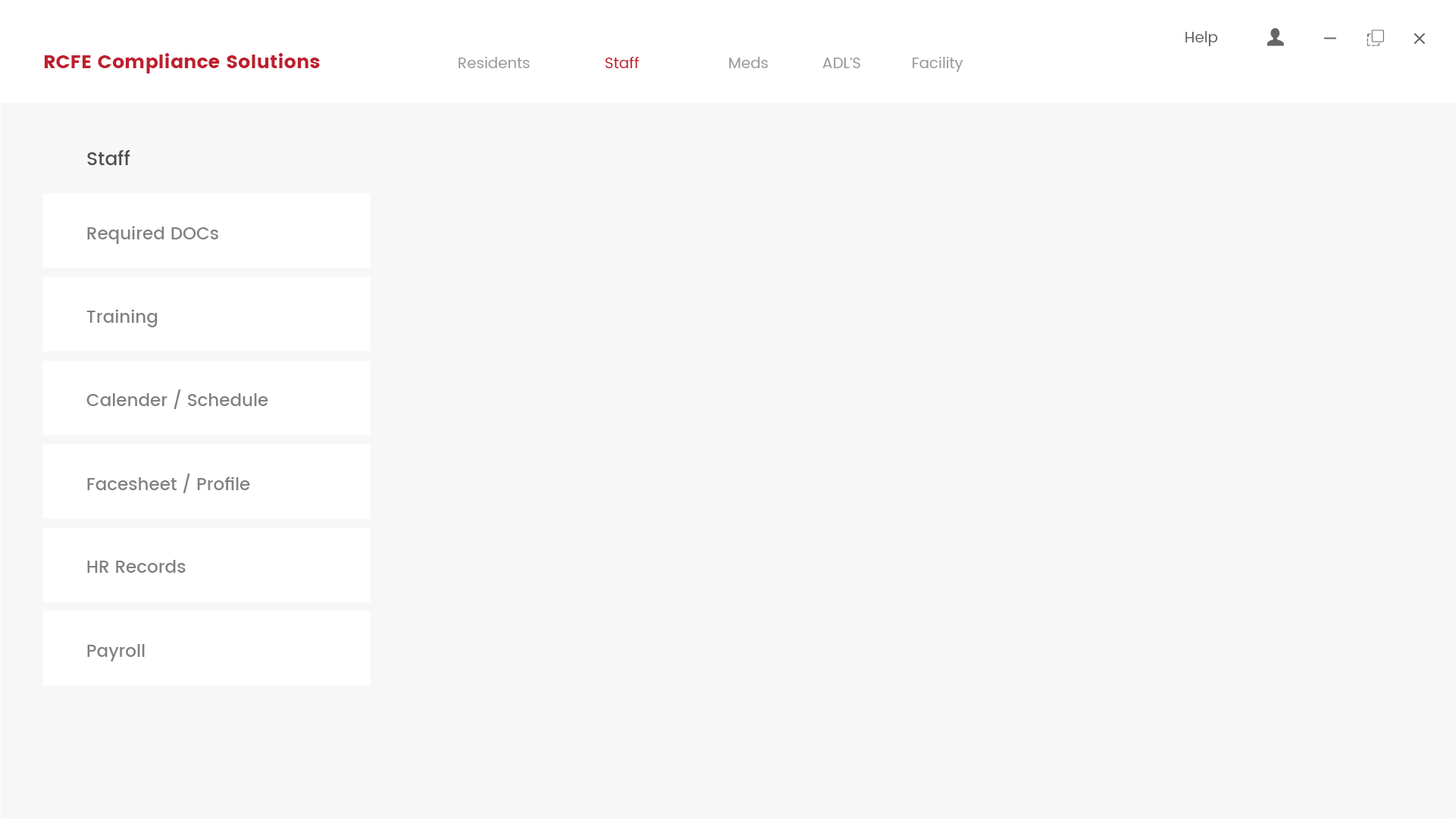
<style>
.page{position:relative;width:1456px;height:819px;background:#f7f7f7}
.page>*{position:absolute;margin:0}
.t1{font:15.2px "Poppins-Regular";color:#666666}
.t2{font:18.9px "Poppins-Bold";color:#bf1e2e}
.t3{font:15.2px "Poppins-Regular";color:#999999}
.t4{font:15.2px "Poppins-Regular";color:#bf1e2e}
.t5{font:18.9px "Poppins-Medium";color:#4d4d4d}
.t6{font:17.4px "Poppins-Medium";color:#808080}
</style>
<div class="page">
<p class="t1" style="left:1185px;top:31px;width:33px;height:15px">Help</p>
<p class="t2" style="left:44px;top:53px;width:276px;height:21px">RCFE Compliance Solutions</p>
<p class="t3" style="left:458px;top:57px;width:72px;height:11px">Residents</p>
<p class="t4" style="left:605px;top:57px;width:34px;height:11px">Staff</p>
<p class="t3" style="left:729px;top:57px;width:39px;height:11px">Meds</p>
<p class="t3" style="left:822px;top:58px;width:38px;height:10px">ADL’S</p>
<p class="t3" style="left:912px;top:57px;width:51px;height:15px">Facility</p>
<p class="t5" style="left:87px;top:150px;width:43px;height:15px">Staff</p>
<p class="t6" style="left:87px;top:226px;width:131px;height:18px">Required DOCs</p>
<p class="t6" style="left:86px;top:309px;width:72px;height:18px">Training</p>
<p class="t6" style="left:86px;top:389px;width:182px;height:20px">Calender / Schedule</p>
<p class="t6" style="left:87px;top:474px;width:163px;height:19px">Facesheet / Profile</p>
<p class="t6" style="left:87px;top:560px;width:99px;height:13px">HR Records</p>
<p class="t6" style="left:87px;top:644px;width:58px;height:18px">Payroll</p>
</div>
